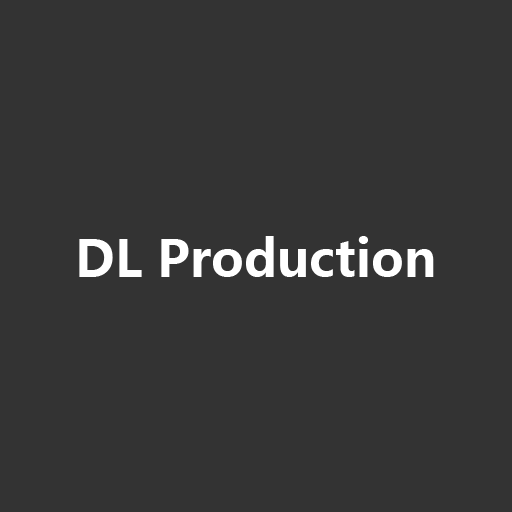
<style>
.page{position:relative;width:512px;height:512px;background:#333333}
.page>*{position:absolute;margin:0}
.t1{font:50px "MicrosoftYaHei-Bold";color:#ffffff}
</style>
<div class="page">
<p class="t1" style="left:79px;top:236px;width:355px;height:41px">DL Production</p>
</div>
